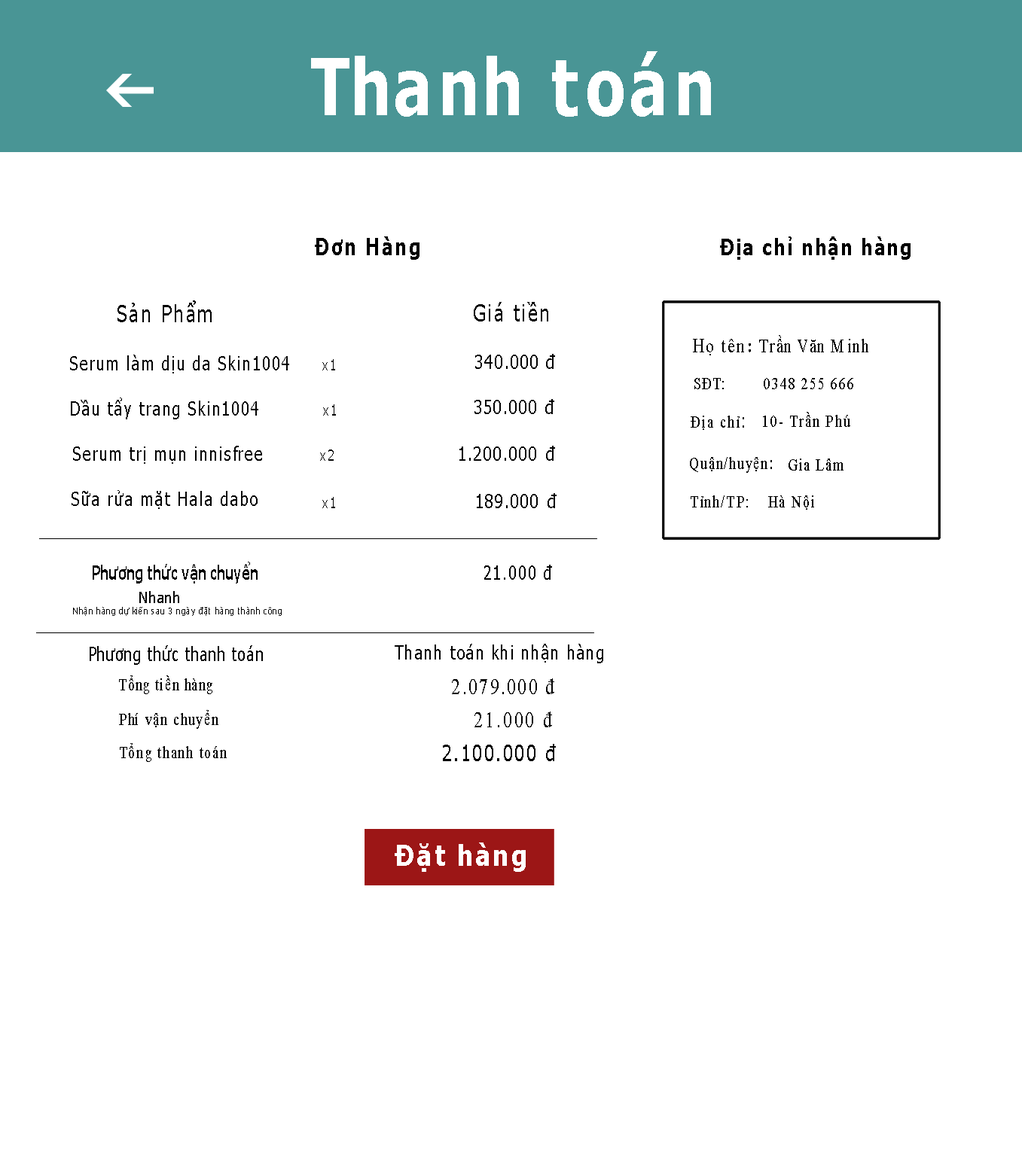
<style>
.page{position:relative;width:1022px;height:1167px;background:#ffffff}
.page>*{position:absolute;margin:0}
.t1{font:78.5px "Tahoma-Bold";letter-spacing:0.1em;color:#ffffff;scale:0.8 1}
.t2{font:23.2px "Tahoma-Bold";letter-spacing:0.1em;color:#000000;scale:0.8 1}
.t3{font:22.2px "Tahoma-Bold";letter-spacing:0.1em;color:#000000;scale:0.8 1}
.t4{font:23.2px "Tahoma";letter-spacing:0.1em;color:#000000;scale:0.8 1}
.t5{font:18.5px "TimesNewRomanPSMT";letter-spacing:0.1em;color:#000000;scale:0.8 1}
.t6{font:20.6px "TimesNewRomanPSMT";letter-spacing:0.1em;color:#000000;scale:0.8 1}
.t7{font:20.6px "TimesNewRomanPS-BoldMT";letter-spacing:0.1em;color:#000000;scale:0.8 1}
.t8{font:19.4px "Tahoma";letter-spacing:0.1em;color:#000000;scale:0.8 1}
.t9{font:18.5px "Tahoma";letter-spacing:0.1em;color:#000000;scale:0.8 1}
.t10{font:14.8px "Tahoma";letter-spacing:0.1em;color:#000000;scale:0.8 1}
.t11{font:16.7px "TimesNewRomanPSMT";letter-spacing:0.1em;color:#000000;scale:0.8 1}
.t12{font:22.2px "TimesNewRomanPSMT";letter-spacing:0.1em;color:#000000;scale:0.8 1}
.t13{font:16.7px "Tahoma";letter-spacing:0.1em;color:#000000;scale:0.8 1}
.t14{font:18.5px "Tahoma-Bold";letter-spacing:0.1em;color:#000000;scale:0.64 1}
.t15{font:14.8px "Tahoma";letter-spacing:0.1em;color:#000000;scale:0.85 1}
.t16{font:9.3px "Tahoma";letter-spacing:0.1em;color:#000000;scale:0.8 1}
.t17{font:18.5px "Tahoma";letter-spacing:0.1em;color:#000000;scale:0.74 1}
.t18{font:22.2px "Tahoma";letter-spacing:0.1em;color:#000000;scale:0.8 1}
.t19{font:28.2px "Tahoma-Bold";letter-spacing:0.1em;color:#ffffff;scale:0.88 1}
</style>
<div class="page">
<p class="t1" style="left:311px;top:51px;width:400px;height:66px">Thanh toán</p>
<p class="t2" style="left:315px;top:236px;width:104px;height:24px">Đơn Hàng</p>
<p class="t3" style="left:720px;top:236px;width:190px;height:24px">Địa chỉ nhận hàng</p>
<p class="t4" style="left:117px;top:300px;width:95px;height:22px">Sản Phẩm</p>
<p class="t4" style="left:474px;top:302px;width:74px;height:20px">Giá tiền</p>
<p class="t5" style="left:693px;top:335px;width:175px;height:20px"><span class="t6">Họ tên</span><span class="t7">: </span>Trần Văn Minh</p>
<p class="t8" style="left:475px;top:354px;width:80px;height:15px">340.000 đ</p>
<p class="t9" style="left:70px;top:355px;width:219px;height:18px">Serum làm dịu da Skin1004</p>
<p class="t10" style="left:322px;top:359px;width:13px;height:11px">x1</p>
<p class="t11" style="left:694px;top:378px;width:30px;height:11px">SĐT:</p>
<p class="t11" style="left:763px;top:378px;width:90px;height:11px">0348 255 666</p>
<p class="t9" style="left:71px;top:398px;width:187px;height:21px">Dầu tẩy trang Skin1004</p>
<p class="t8" style="left:474px;top:399px;width:80px;height:15px">350.000 đ</p>
<p class="t10" style="left:323px;top:404px;width:13px;height:12px">x1</p>
<p class="t11" style="left:763px;top:412px;width:87px;height:15px">10- Trần Phú</p>
<p class="t11" style="left:690px;top:416px;width:54px;height:14px">Địa chỉ<span class="t12">:</span></p>
<p class="t9" style="left:73px;top:446px;width:189px;height:18px">Serum trị mụn innisfree</p>
<p class="t10" style="left:320px;top:450px;width:14px;height:11px">x2</p>
<p class="t8" style="left:459px;top:446px;width:96px;height:15px">1.200.000 đ</p>
<p class="t11" style="left:690px;top:457px;width:82px;height:16px">Quận/huyện<span class="t13">:</span></p>
<p class="t11" style="left:788px;top:459px;width:55px;height:12px">Gia Lâm</p>
<p class="t9" style="left:72px;top:490px;width:186px;height:19px">Sữa rửa mặt Hala dabo</p>
<p class="t10" style="left:322px;top:497px;width:13px;height:11px">x1</p>
<p class="t8" style="left:477px;top:493px;width:79px;height:15px">189.000 đ</p>
<p class="t11" style="left:690px;top:495px;width:58px;height:12px">Tỉnh/TP:</p>
<p class="t11" style="left:768px;top:495px;width:46px;height:15px">Hà Nội</p>
<p class="t14" style="left:93px;top:562px;width:165px;height:22px">Phương thức vận chuyển</p>
<p class="t9" style="left:484px;top:565px;width:68px;height:15px">21.000 đ</p>
<p class="t15" style="left:139px;top:591px;width:40px;height:12px">Nhanh</p>
<p class="t16" style="left:73px;top:607px;width:209px;height:9px">Nhận hàng dự kiến sau 3 ngày đặt hàng thành công</p>
<p class="t17" style="left:90px;top:645px;width:173px;height:20px">Phương thức thanh toán</p>
<p class="t9" style="left:395px;top:644px;width:208px;height:19px">Thanh toán khi nhận hàng</p>
<p class="t11" style="left:119px;top:675px;width:93px;height:19px">Tổng tiền hàng</p>
<p class="t12" style="left:452px;top:678px;width:102px;height:16px">2.079.000 đ</p>
<p class="t11" style="left:119px;top:710px;width:99px;height:19px">Phí vận chuyển</p>
<p class="t12" style="left:474px;top:712px;width:78px;height:15px">21.000 đ</p>
<p class="t11" style="left:120px;top:743px;width:107px;height:19px">Tổng thanh toán</p>
<p class="t18" style="left:443px;top:744px;width:113px;height:17px">2.100.000 đ</p>
<p class="t19" style="left:395px;top:843px;width:131px;height:29px">Đặt hàng</p>
</div>
